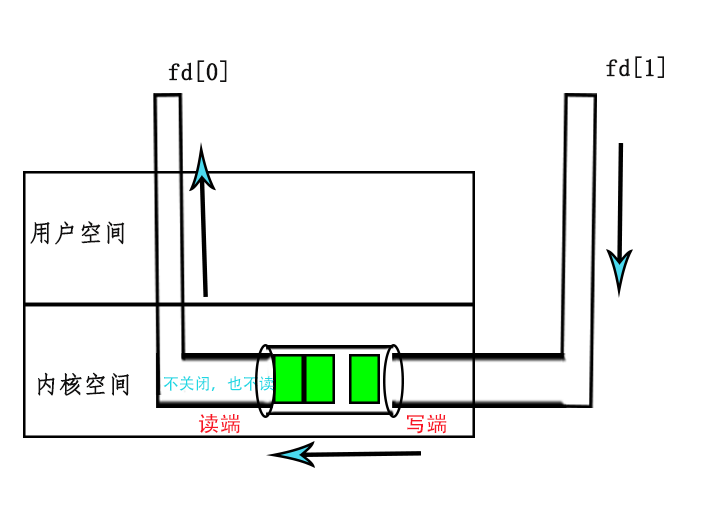
<style>
.page{position:relative;width:709px;height:510px;background:#ffffff}
.page>*{position:absolute;margin:0}
.t1{font:24.1px "FangSong";color:#111010;font-weight:bold}
.t2{font:16px "AdobeHeitiStd-Regular";color:#1dd8e4}
.t3{font:21.5px "AdobeHeitiStd-Regular";color:#f81525}
</style>
<div class="page">
<p class="t1" style="left:168px;top:60px;width:59px;height:22px">fd[0]</p>
<p class="t1" style="left:606px;top:56px;width:58px;height:22px">fd[1]</p>
<p class="t1" style="left:30px;top:221px;width:95px;height:24px">用户空间</p>
<p class="t1" style="left:38px;top:372px;width:91px;height:24px">内核空间</p>
<p class="t2" style="left:163px;top:376px;width:111px;height:15px">不关闭，也不读</p>
<p class="t3" style="left:198px;top:414px;width:42px;height:20px">读端</p>
<p class="t3" style="left:407px;top:414px;width:40px;height:20px">写端</p>
</div>
